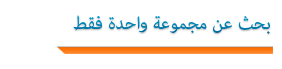
<style>
.page{position:relative;width:282px;height:69px;background:#ffffff}
.page>*{position:absolute;margin:0}
.t1{font:25px "AdobeArabic-Regular";color:#0079ac}
</style>
<div class="page">
<p class="t1" style="left:73px;top:15px;width:197px;height:19px">بحث عن مجموعة واحدة فقط</p>
</div>
